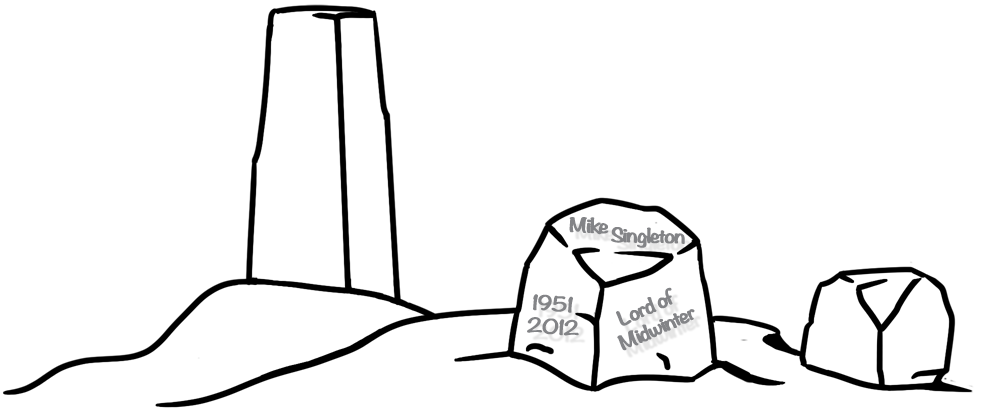
<style>
.page{position:relative;width:981px;height:411px;background:#ffffff}
.page>*{position:absolute;margin:0}
.t1{font:17.7px "Noteworthy-Bold";letter-spacing:-0.075em;color:#838487;font-weight:bold;scale:1.2 1}
.t2{font:18px "Noteworthy-Bold";letter-spacing:-0.075em;color:#838487;font-weight:bold;scale:1.2 1}
</style>
<div class="page">
<p class="t1" style="left:569px;top:217px;width:40px;height:18px;rotate:1deg">Mike</p>
<p class="t1" style="left:611px;top:227px;width:74px;height:21px;rotate:1deg">Singleton</p>
<p class="t2" style="left:527px;top:294px;width:52px;height:42px;text-align:center;rotate:4deg">1951 <br>2012</p>
<p class="t2" style="left:616px;top:287px;width:79px;height:64px;text-align:center;rotate:-24deg">Lord of <br>Midwinter</p>
</div>
